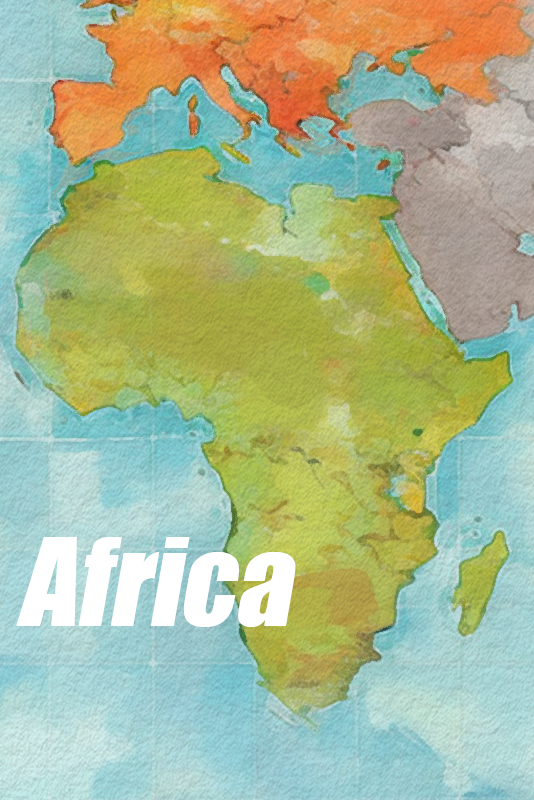
<style>
.page{position:relative;width:534px;height:800px}
.page>*{position:absolute;margin:0}
.t1{font:112px "Impact";color:#ffffff;font-style:italic}
</style>
<div class="page">
<p class="t1" style="left:16px;top:537px;width:280px;height:90px">Africa</p>
</div>
